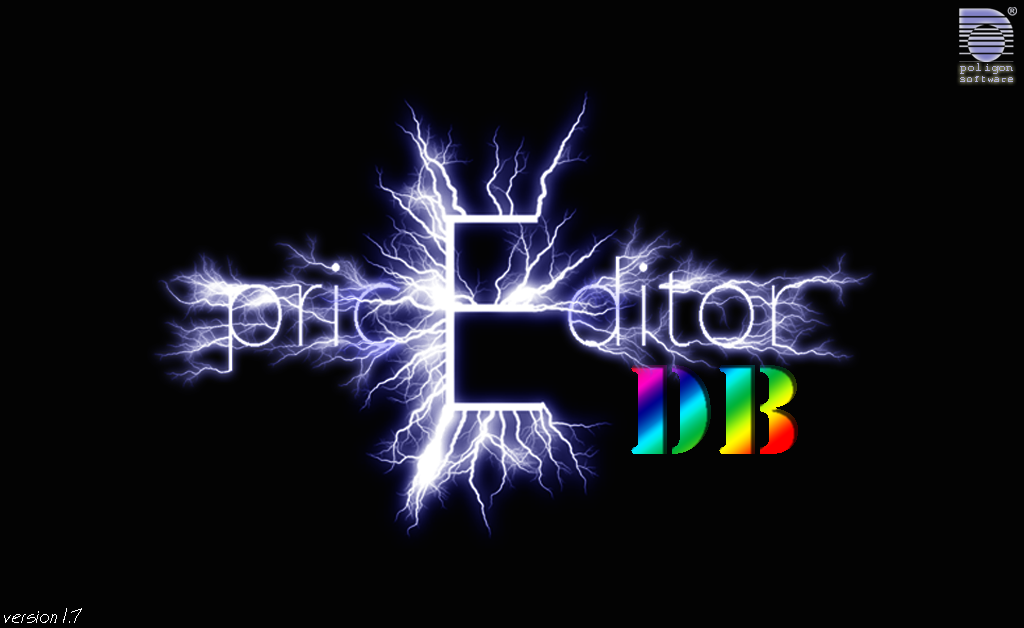
<style>
.page{position:relative;width:1024px;height:628px;background:#030303}
.page>*{position:absolute;margin:0}
.t1{font:13.2px "SimplifiedArabicFixed";color:#adadd4}
.t2{font:11.3px "SimplifiedArabicFixed";color:#adadd4}
.t3{font:118.5px "StencilStd"}
.t4{font:18px "CountryBlueprint";color:#ffffff}
</style>
<div class="page">
<p class="t1" style="left:960px;top:63px;width:53px;height:11px">poligon</p>
<p class="t2" style="left:960px;top:76px;width:53px;height:6px">software</p>
<p class="t3" style="left:631px;top:365px;width:167px;height:89px">DB</p>
<p class="t4" style="left:4px;top:608px;width:78px;height:15px">version 1.7</p>
</div>
